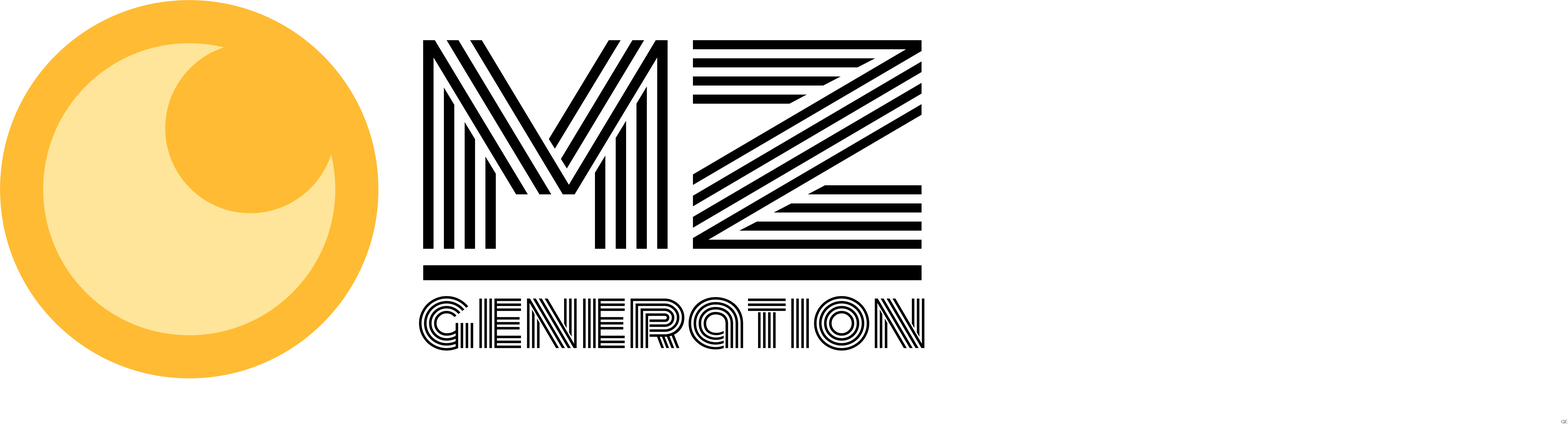
<style>
.page{position:relative;width:1568px;height:424px;background:#ffffff}
.page>*{position:absolute;margin:0}
.t1{font:258px "Monoton-Regular";color:#000000;scale:1.14 1}
.t2{font:70.4px "Monoton-Regular";color:#000000}
.t3{font:4.6px "AdobeMyungjoStd-Medium";color:#000000}
</style>
<div class="page">
<p class="t1" style="left:423px;top:40px;width:499px;height:209px">MZ</p>
<p class="t2" style="left:419px;top:296px;width:506px;height:55px">generation</p>
<p class="t3" style="left:1561px;top:420px;width:6px;height:3px">GE</p>
</div>
